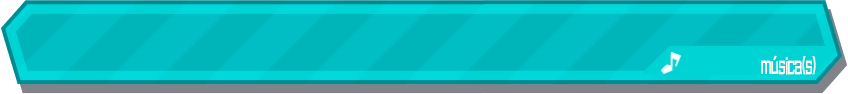
<style>
.page{position:relative;width:848px;height:94px;background:#00bec4}
.page>*{position:absolute;margin:0}
.t1{font:20px "KafuTechnoStd-E";color:#ffffff;scale:0.5 1}
</style>
<div class="page">
<p class="t1" style="left:761px;top:55px;width:55px;height:20px">música(s)</p>
</div>
